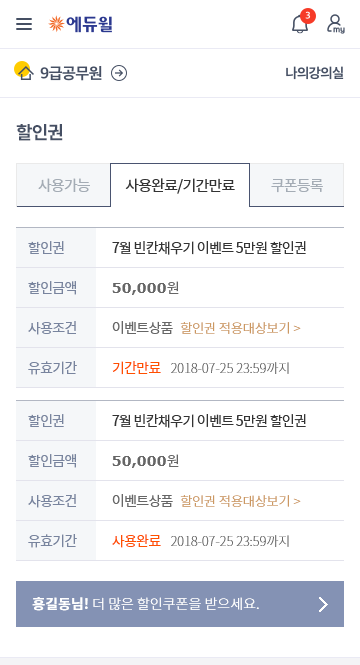
<style>
.page{position:relative;width:360px;height:665px;background:#ffffff}
.page>*{position:absolute;margin:0}
.t1{font:18px "NotoSansCJKkr-Bold";letter-spacing:-0.05em;color:#454f63}
.t2{font:15px "NotoSansCJKkr-Regular";letter-spacing:-0.05em;color:#a4acb5}
.t3{font:15px "NotoSansCJKkr-Regular";letter-spacing:-0.05em;color:#333333}
.t4{font:14px/40px "NotoSansCJKkr-Regular";letter-spacing:-0.05em;color:#78849e}
.t5{font:14px/40px "NotoSansCJKkr-Regular";letter-spacing:-0.05em;color:#333333}
.t6{font:14px/40px "Verdana-Bold";color:#666666}
.t7{font:14px/40px "NotoSansCJKkr-Regular";color:#666666}
.t8{font:14px/40px "NotoSansCJKkr-Regular";letter-spacing:-0.05em;color:#666666}
.t9{font:13px/20px "NotoSansCJKkr-Light";color:#cc9861}
.t10{font:14px/40px "NotoSansCJKkr-Regular";letter-spacing:-0.05em;color:#ff5000}
.t11{font:13px/40px "NotoSansCJKkr-Thin";color:#666666}
.t12{font:14px "NotoSansCJKkr-Light";color:#ffffff}
.t13{font:14px "NotoSansCJKkr-Bold";color:#ffffff}
</style>
<div class="page">
<p class="t1" style="left:16px;top:124px;width:47px;height:17px">할인권</p>
<p class="t2" style="left:38px;top:178px;width:52px;height:14px">사용가능</p>
<p class="t3" style="left:125px;top:178px;width:110px;height:16px">사용완료/기간만료</p>
<p class="t2" style="left:271px;top:179px;width:52px;height:14px">쿠폰등록</p>
<p class="t4" style="left:28px;top:241px;width:49px;height:134px">할인권<br>할인금액<br>사용조건<br>유효기간</p>
<p class="t5" style="left:112px;top:241px;width:194px;height:134px">7월 빈칸채우기 이벤트 5만원 할인권<br><span class="t6">50,000</span><span class="t7">원<br></span><span class="t8">이벤트상품   </span><span class="t9">할인권 적용대상보기 &gt;<br></span><span class="t10">기간만료  </span><span class="t11">2018-07-25 23:59까지</span></p>
<p class="t4" style="left:28px;top:414px;width:49px;height:134px">할인권<br>할인금액<br>사용조건<br>유효기간</p>
<p class="t5" style="left:112px;top:414px;width:194px;height:134px">7월 빈칸채우기 이벤트 5만원 할인권<br><span class="t6">50,000</span><span class="t7">원<br></span><span class="t8">이벤트상품   </span><span class="t9">할인권 적용대상보기 &gt;<br></span><span class="t10">사용완료  </span><span class="t11">2018-07-25 23:59까지</span></p>
<p class="t12" style="left:32px;top:597px;width:227px;height:14px"><span class="t13">홍길동님! </span>더 많은 할인쿠폰을 받으세요.</p>
</div>
